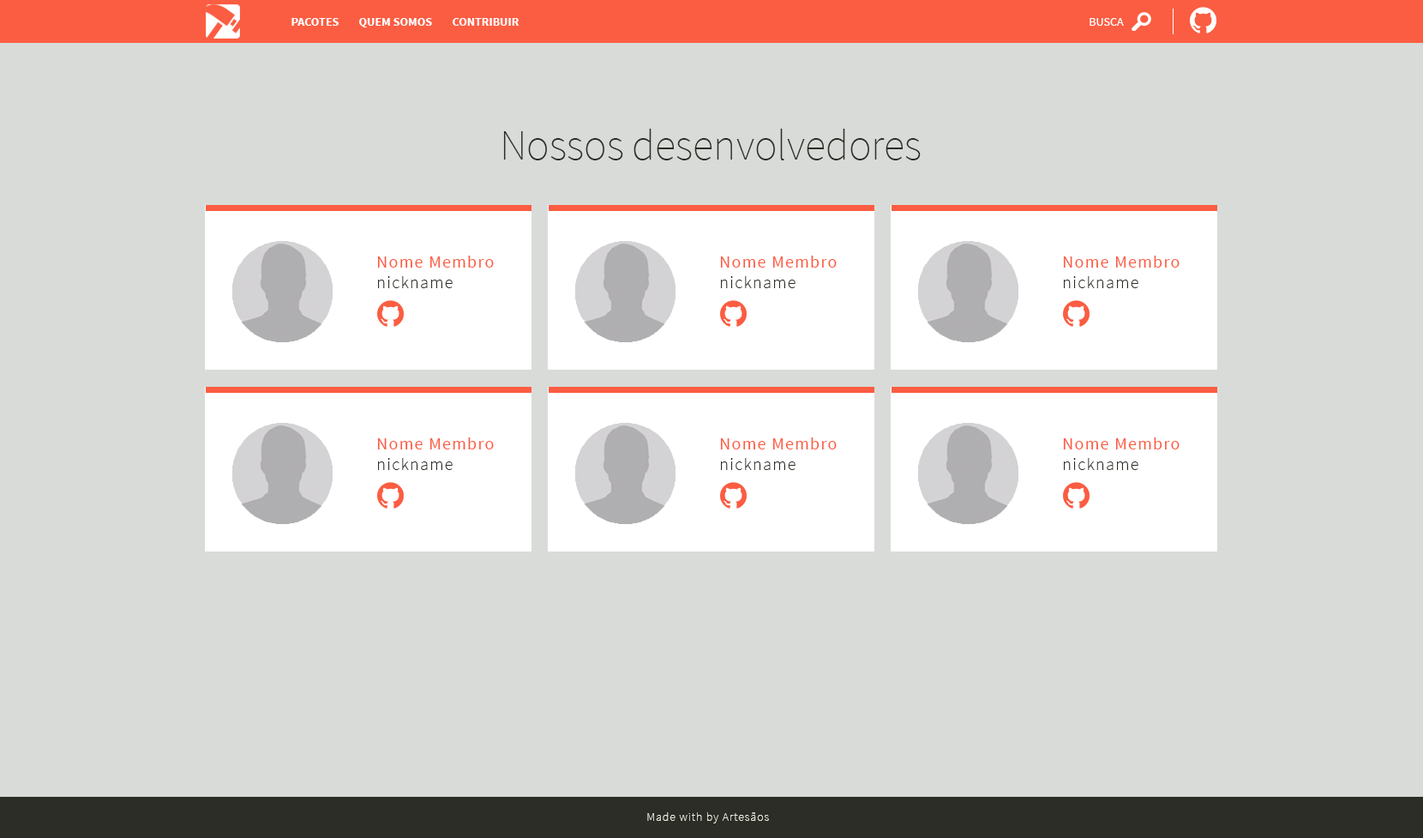
<style>
.page{position:relative;width:1423px;height:838px;background:#d9dbd8}
.page>*{position:absolute;margin:0}
.t1{font:12px "SourceSansPro-Bold";color:#ffffff}
.t2{font:12px "SourceSansPro-Regular";color:#ffffff}
.t3{font:42.9px "SourceSansPro-ExtraLight";color:#2b2d26}
.t4{font:17.1px "SourceSansPro-Regular";letter-spacing:0.065em;color:#fb5d42}
.t5{font:17.1px "SourceSansPro-Light";letter-spacing:0.065em;color:#2b2d26}
.t6{font:12px "SourceSansPro-ExtraLight";letter-spacing:0.065em;color:#eceddf}
</style>
<div class="page">
<p class="t1" style="left:292px;top:18px;width:47px;height:8px">PACOTES</p>
<p class="t1" style="left:359px;top:18px;width:73px;height:9px">QUEM SOMOS</p>
<p class="t1" style="left:453px;top:18px;width:67px;height:8px">CONTRIBUIR</p>
<p class="t2" style="left:1090px;top:18px;width:34px;height:8px">BUSCA</p>
<p class="t3" style="left:503px;top:129px;width:418px;height:31px">Nossos desenvolvedores</p>
<p class="t4" style="left:377px;top:256px;width:117px;height:32px">Nome Membro<br><span class="t5">nickname</span></p>
<p class="t4" style="left:720px;top:256px;width:117px;height:32px">Nome Membro<br><span class="t5">nickname</span></p>
<p class="t4" style="left:1063px;top:256px;width:117px;height:32px">Nome Membro<br><span class="t5">nickname</span></p>
<p class="t4" style="left:377px;top:437px;width:117px;height:33px">Nome Membro<br><span class="t5">nickname</span></p>
<p class="t4" style="left:720px;top:437px;width:117px;height:33px">Nome Membro<br><span class="t5">nickname</span></p>
<p class="t4" style="left:1063px;top:437px;width:117px;height:33px">Nome Membro<br><span class="t5">nickname</span></p>
<p class="t6" style="left:647px;top:812px;width:122px;height:11px">Made with by Artesãos</p>
</div>
